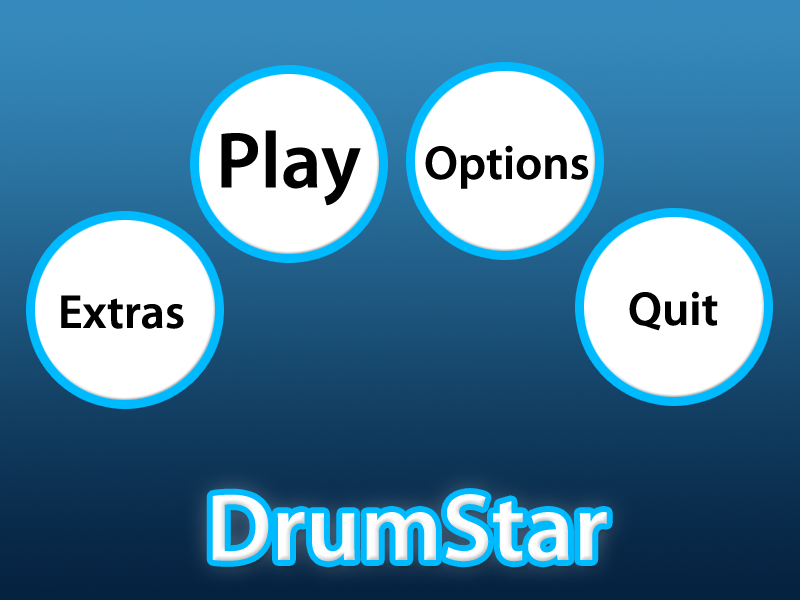
<style>
.page{position:relative;width:800px;height:600px}
.page>*{position:absolute;margin:0}
.t1{font:80px "MyriadPro-Semibold";color:#000000}
.t2{font:48px "MyriadPro-Semibold";color:#000000}
.t3{font:96px "MyriadPro-Semibold";color:#fefefe}
</style>
<div class="page">
<p class="t1" style="left:221px;top:130px;width:140px;height:76px">Play</p>
<p class="t2" style="left:425px;top:145px;width:164px;height:44px">Options</p>
<p class="t2" style="left:629px;top:291px;width:89px;height:40px">Quit</p>
<p class="t2" style="left:61px;top:295px;width:123px;height:34px">Extras</p>
<p class="t3" style="left:212px;top:494px;width:395px;height:68px">DrumStar</p>
</div>
